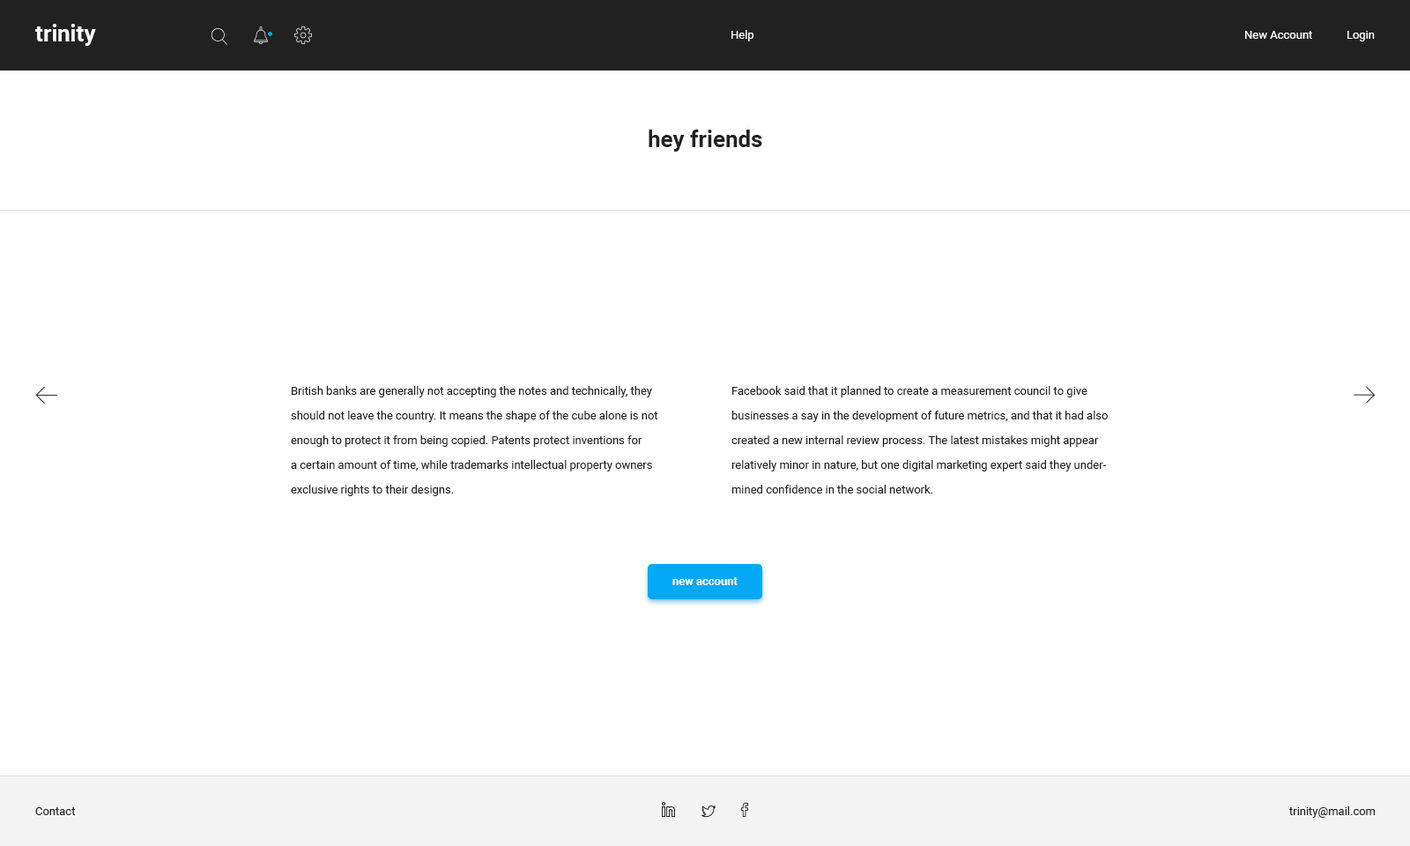
<style>
.page{position:relative;width:1410px;height:846px;background:#ffffff}
.page>*{position:absolute;margin:0}
.t1{font:22.9px "Roboto-Bold";color:#ffffff}
.t2{font:11.5px "Roboto-Regular";color:#ffffff}
.t3{font:22.9px "Roboto-Bold";color:#212121}
.t4{font:11.5px/24.7px "Roboto-Regular";color:#212121}
.t5{font:11.5px "Roboto-Bold";color:#ffffff}
.t6{font:11.5px "Roboto-Regular";color:#212121}
</style>
<div class="page">
<p class="t1" style="left:35px;top:24px;width:61px;height:22px">trinity</p>
<p class="t2" style="left:731px;top:30px;width:22px;height:11px">Help</p>
<p class="t2" style="left:1245px;top:31px;width:130px;height:10px">New Account            Login</p>
<p class="t3" style="left:648px;top:130px;width:114px;height:22px">hey friends</p>
<p class="t4" style="left:291px;top:386px;width:367px;height:110px">British banks are generally not accepting the notes and technically, they should not leave the country. It means the shape of the cube alone is not enough to protect it from being copied. Patents protect inventions for <br>a certain amount of time, while trademarks intellectual property owners exclusive rights to their designs.</p>
<p class="t4" style="left:731px;top:386px;width:377px;height:107px">Facebook said that it planned to create a measurement council to give businesses a say in the development of future metrics, and that it had also created a new internal review process. The latest mistakes might appear relatively minor in nature, but one digital marketing expert said they undermined confidence in the social network.</p>
<p class="t5" style="left:672px;top:577px;width:65px;height:8px">new account</p>
<p class="t6" style="left:35px;top:807px;width:41px;height:8px">Contact</p>
<p class="t6" style="left:1288px;top:806px;width:87px;height:12px">trinity@mail.com</p>
</div>
